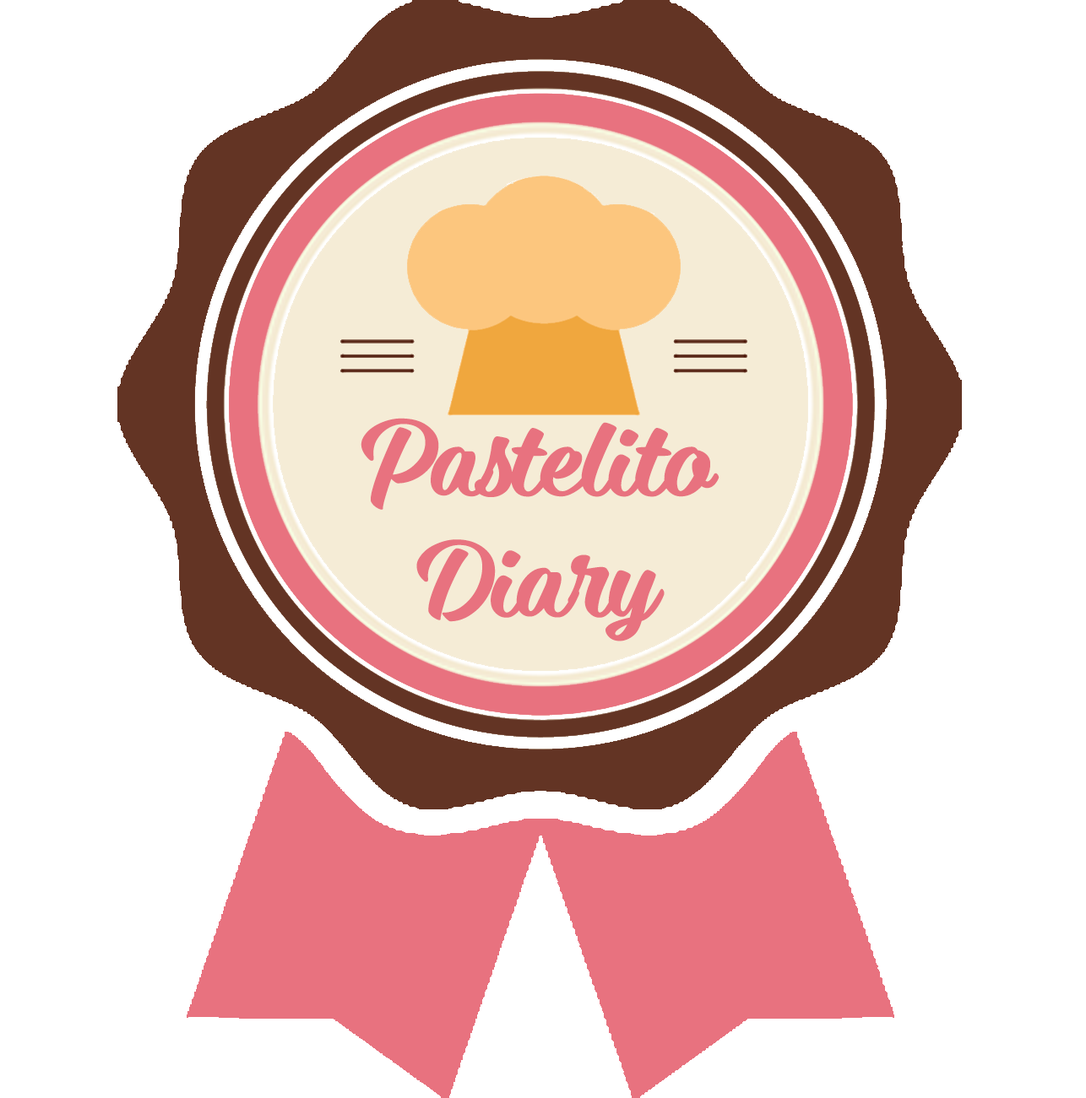
<style>
.page{position:relative;width:1086px;height:1098px;background:#ffffff}
.page>*{position:absolute;margin:0}
.t1{font:121.5px/121px "ø";letter-spacing:-0.025em;color:#e8727f}
</style>
<div class="page">
<p class="t1" style="left:360px;top:418px;width:359px;height:224px;text-align:center">Pastelito<br>Diary</p>
</div>
